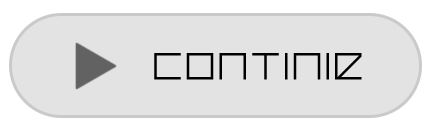
<style>
.page{position:relative;width:430px;height:130px;background:#e3e3e3}
.page>*{position:absolute;margin:0}
.t1{font:77px "AuricomRegular";letter-spacing:0.05em;color:#000000}
</style>
<div class="page">
<p class="t1" style="left:154px;top:53px;width:208px;height:27px">CONTINIE</p>
</div>
